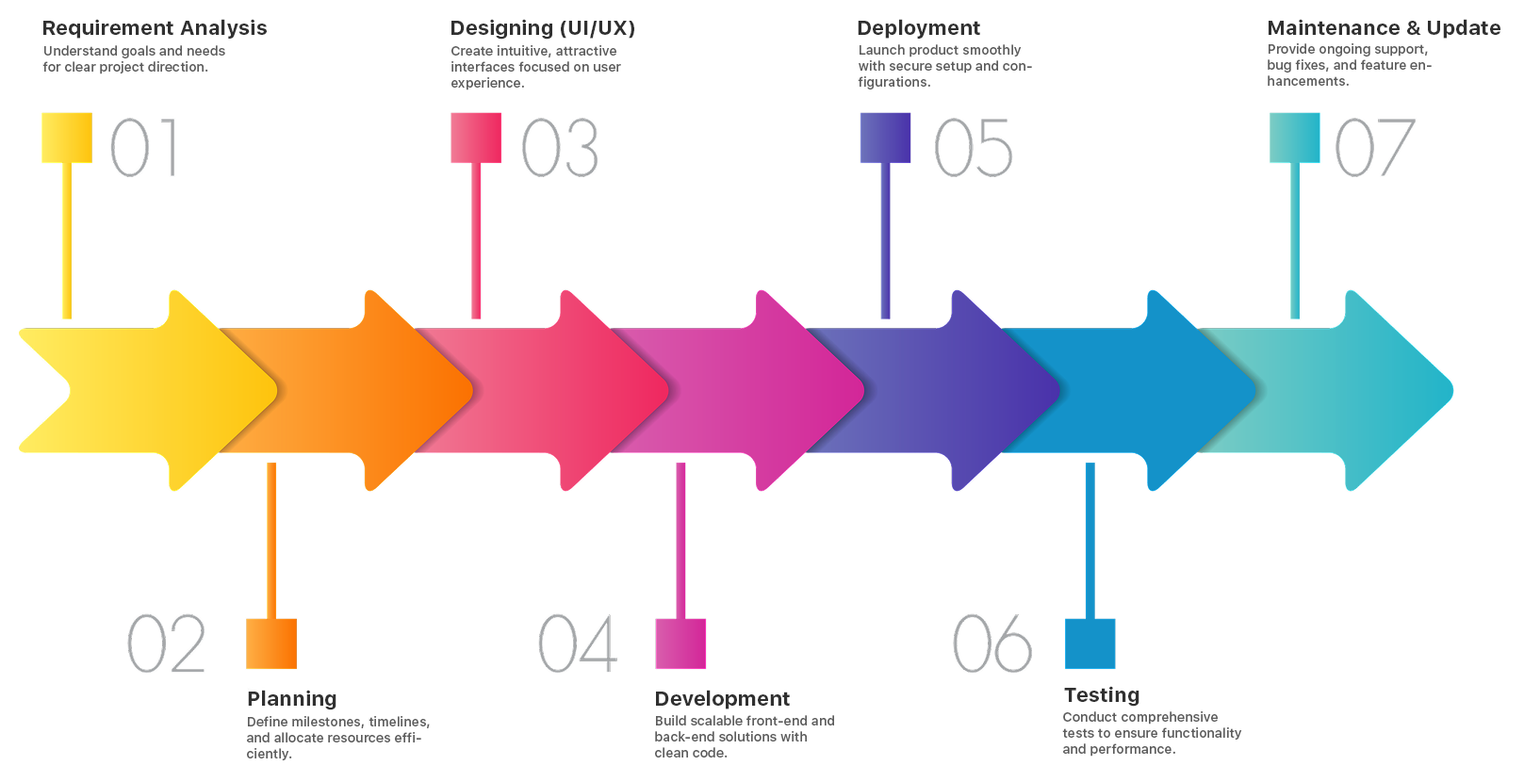
<style>
.page{position:relative;width:1524px;height:782px;background:#ffffff}
.page>*{position:absolute;margin:0}
.t1{font:20.5px "SFUIText-Bold";color:#303030}
.t2{font:13.2px "SFUIText-Medium";color:#5d5d5d}
</style>
<div class="page">
<p class="t1" style="left:43px;top:19px;width:224px;height:20px">Requirement Analysis</p>
<p class="t1" style="left:452px;top:19px;width:182px;height:21px">Designing (UI/UX)</p>
<p class="t1" style="left:858px;top:19px;width:122px;height:20px">Deployment</p>
<p class="t1" style="left:1269px;top:19px;width:232px;height:20px">Maintenance &amp; Update</p>
<p class="t2" style="left:42px;top:45px;width:183px;height:29px">Understand goals and needs for clear project direction.</p>
<p class="t2" style="left:452px;top:45px;width:169px;height:45px">Create intuitive, attractive interfaces focused on user experience.</p>
<p class="t2" style="left:858px;top:44px;width:174px;height:46px">Launch product smoothly with secure setup and configurations.</p>
<p class="t2" style="left:1268px;top:43px;width:164px;height:43px">Provide ongoing support, bug fixes, and feature enhancements.</p>
<p class="t1" style="left:248px;top:690px;width:89px;height:21px">Planning</p>
<p class="t1" style="left:656px;top:690px;width:134px;height:20px">Development</p>
<p class="t1" style="left:1064px;top:686px;width:76px;height:21px">Testing</p>
<p class="t2" style="left:1062px;top:712px;width:180px;height:45px">Conduct comprehensive tests to ensure functionality and performance.</p>
<p class="t2" style="left:247px;top:716px;width:183px;height:45px">Define milestones, timelines, and allocate resources efficiently.</p>
<p class="t2" style="left:655px;top:715px;width:179px;height:43px">Build scalable front-end and back-end solutions with clean code.</p>
</div>
